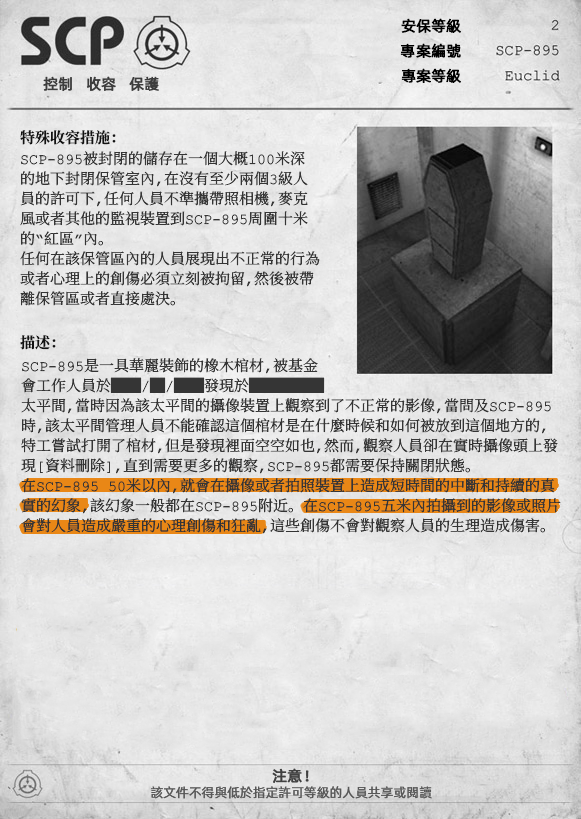
<style>
.page{position:relative;width:581px;height:819px}
.page>*{position:absolute;margin:0}
.t1{font:15px "AlibabaPuHuiTiR";color:#000000;font-weight:bold}
.t2{font:15px "AlibabaPuHuiTiR";color:#3d3d3d;font-weight:bold}
.t3{font:15px "ContainmentBreach-Bold";color:#121212}
.t4{font:15px/20px "ContainmentBreach-Regular";color:#353535}
.t5{font:15px "AlibabaPuHuiTiR";color:#414141;font-weight:bold}
.t6{font:13px "AlibabaPuHuiTiR";color:#575757}
</style>
<div class="page">
<p class="t1" style="left:401px;top:18px;width:60px;height:15px">安保等級</p>
<p class="t1" style="left:400px;top:43px;width:61px;height:15px">專案編號</p>
<p class="t2" style="left:43px;top:76px;width:116px;height:15px">控制   收容   保護</p>
<p class="t1" style="left:401px;top:68px;width:60px;height:15px">專案等級</p>
<p class="t3" style="left:20px;top:130px;width:96px;height:15px">特殊收容措施：</p>
<p class="t4" style="left:20px;top:151px;width:300px;height:155px">SCP-895被封閉的儲存在一個大概100米深<br>的地下封閉保管室內，在沒有至少兩個3級人<br>員的許可下，任何人員不準攜帶照相機，麥克<br>風或者其他的監視裝置到SCP-895周圍十米<br>的“紅區”內。<br>任何在該保管區內的人員展現出不正常的行為<br>或者心理上的創傷必須立刻被拘留，然後被帶<br>離保管區或者直接處決。</p>
<p class="t3" style="left:20px;top:335px;width:36px;height:15px">描述：</p>
<p class="t4" style="left:21px;top:358px;width:540px;height:176px">SCP-895是一具華麗裝飾的橡木棺材，被基金<br>會工作人員於██/█/██發現於█████<br>太平間，當時因為該太平間的攝像裝置上觀察到了不正常的影像，當問及SCP-895<br>時，該太平間管理人員不能確認這個棺材是在什麼時候和如何被放到這個地方的，<br>特工嘗試打開了棺材，但是發現裡面空空如也，然而，觀察人員卻在實時攝像頭上發<br>現[資料刪除]，直到需要更多的觀察，SCP-895都需要保持關閉狀態。<br>在SCP-895 50米以內，就會在攝像或者拍照裝置上造成短時間的中斷和持續的真<br>實的幻象，該幻象一般都在SCP-895附近。在SCP-895五米內拍攝到的影像或照片<br>會對人員造成嚴重的心理創傷和狂亂，這些創傷不會對觀察人員的生理造成傷害。</p>
<p class="t5" style="left:272px;top:768px;width:37px;height:15px">注意！</p>
<p class="t6" style="left:151px;top:786px;width:281px;height:13px">該文件不得與低於指定許可等級的人員共享或閱讀</p>
</div>
